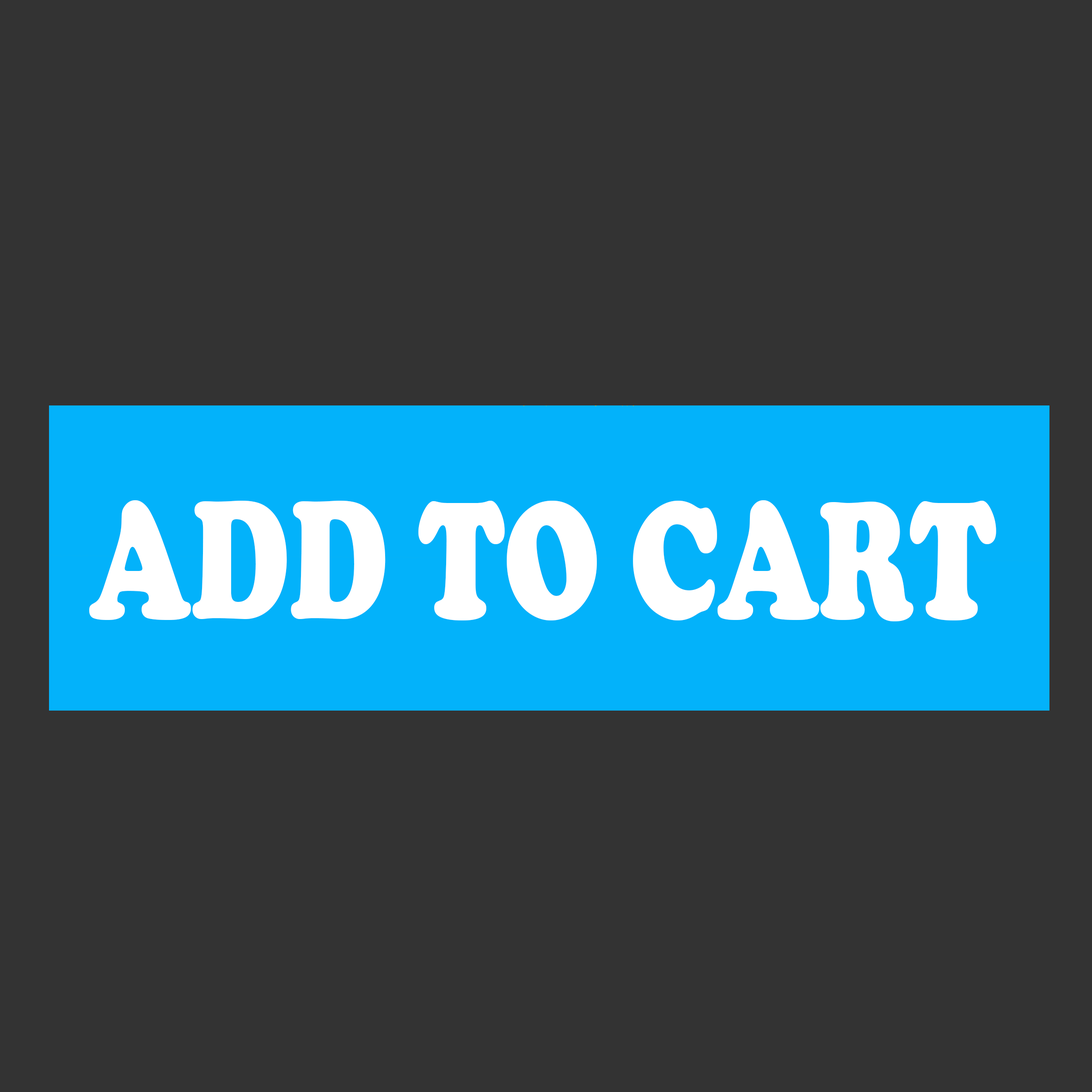
<style>
.page{position:relative;width:1092px;height:1092px;background:#333333}
.page>*{position:absolute;margin:0}
.t1{font:173.1px "CooperBlack";color:#ffffff;scale:0.71 1}
</style>
<div class="page">
<p class="t1" style="left:89px;top:500px;width:907px;height:121px">ADD TO CART</p>
</div>
